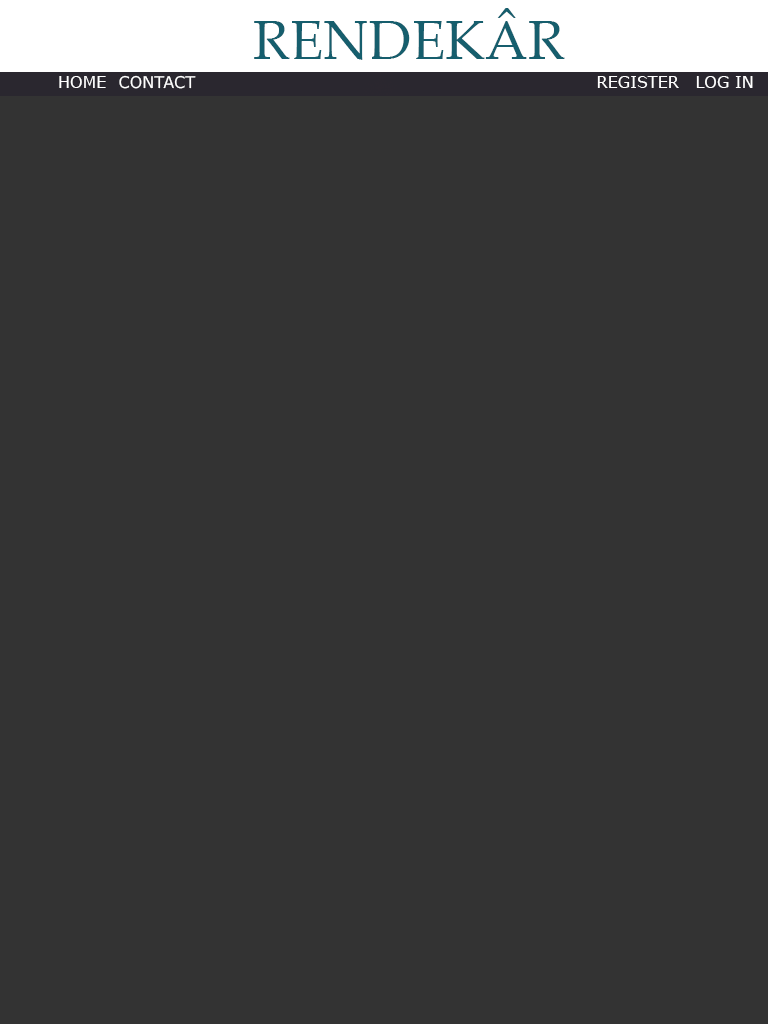
<style>
.page{position:relative;width:768px;height:1024px;background:#333333}
.page>*{position:absolute;margin:0}
.t1{font:55px "PalatinoLinotype-Roman";color:#165e6d}
.t2{font:16px "Verdana";color:#ffffff}
</style>
<div class="page">
<p class="t1" style="left:254px;top:8px;width:311px;height:52px">RENDEKÂR</p>
<p class="t2" style="left:59px;top:76px;width:47px;height:12px">HOME</p>
<p class="t2" style="left:119px;top:75px;width:77px;height:14px">CONTACT</p>
<p class="t2" style="left:597px;top:76px;width:82px;height:12px">REGISTER</p>
<p class="t2" style="left:696px;top:76px;width:57px;height:12px">LOG IN</p>
</div>
